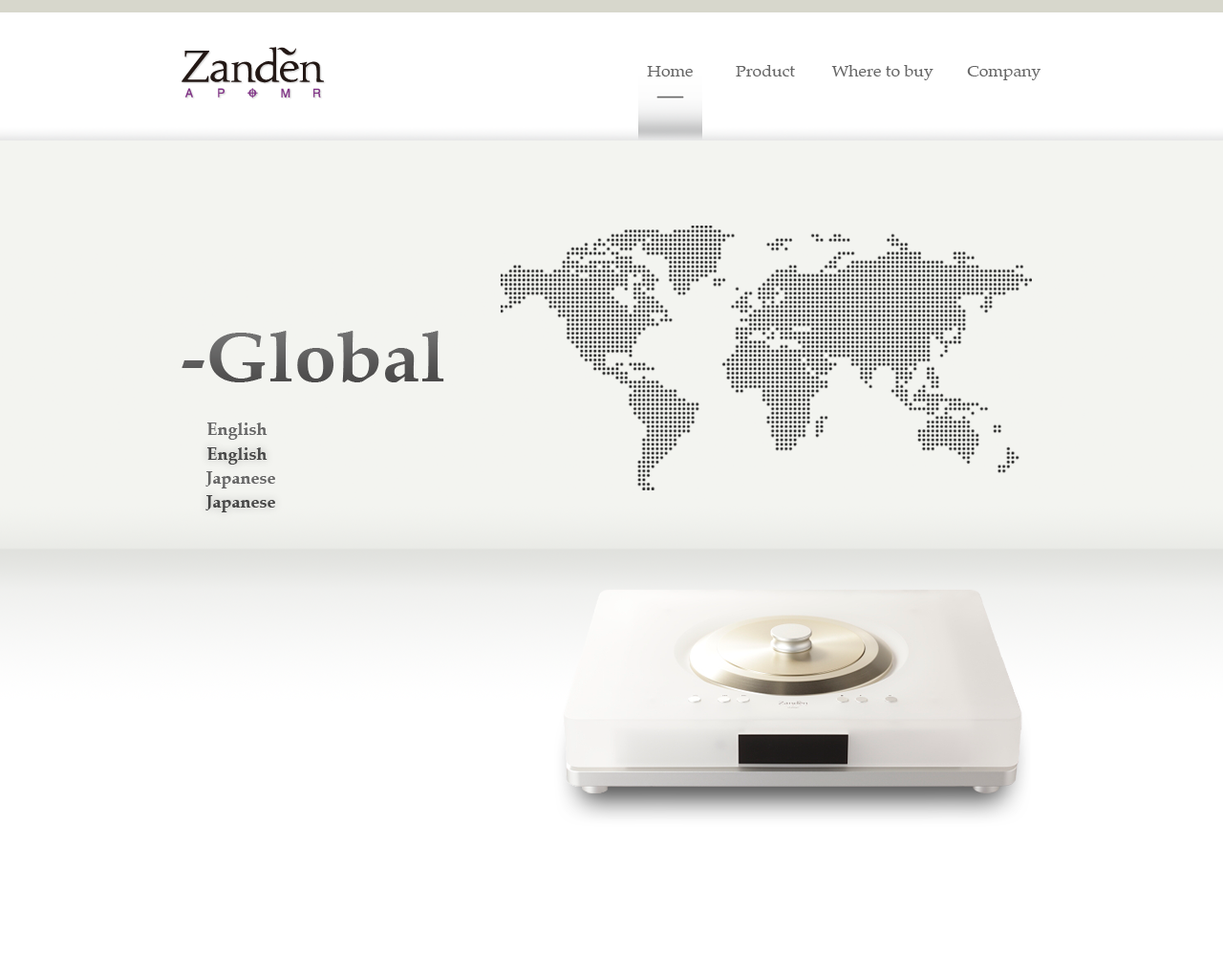
<style>
.page{position:relative;width:1223px;height:975px;background:#ffffff}
.page>*{position:absolute;margin:0}
.t1{font:15.3px "Palatino-Roman";color:#666666;scale:1.1 1}
.t2{font:68.8px "Palatino-Bold";color:#666666;scale:1.1 1}
.t3{font:17.2px "Palatino-Bold";color:#666666}
.t4{font:17.2px "Palatino-Bold";color:#464646}
</style>
<div class="page">
<p class="t1" style="left:647px;top:66px;width:46px;height:10px">Home</p>
<p class="t1" style="left:736px;top:65px;width:59px;height:11px">Product</p>
<p class="t1" style="left:831px;top:65px;width:103px;height:15px">Where to buy</p>
<p class="t1" style="left:967px;top:66px;width:74px;height:14px">Company</p>
<p class="t2" style="left:182px;top:331px;width:262px;height:51px">-Global</p>
<p class="t3" style="left:206px;top:422px;width:62px;height:18px">English</p>
<p class="t4" style="left:206px;top:447px;width:62px;height:17px">English</p>
<p class="t3" style="left:205px;top:471px;width:70px;height:17px">Japanese</p>
<p class="t4" style="left:205px;top:495px;width:70px;height:17px">Japanese</p>
</div>
